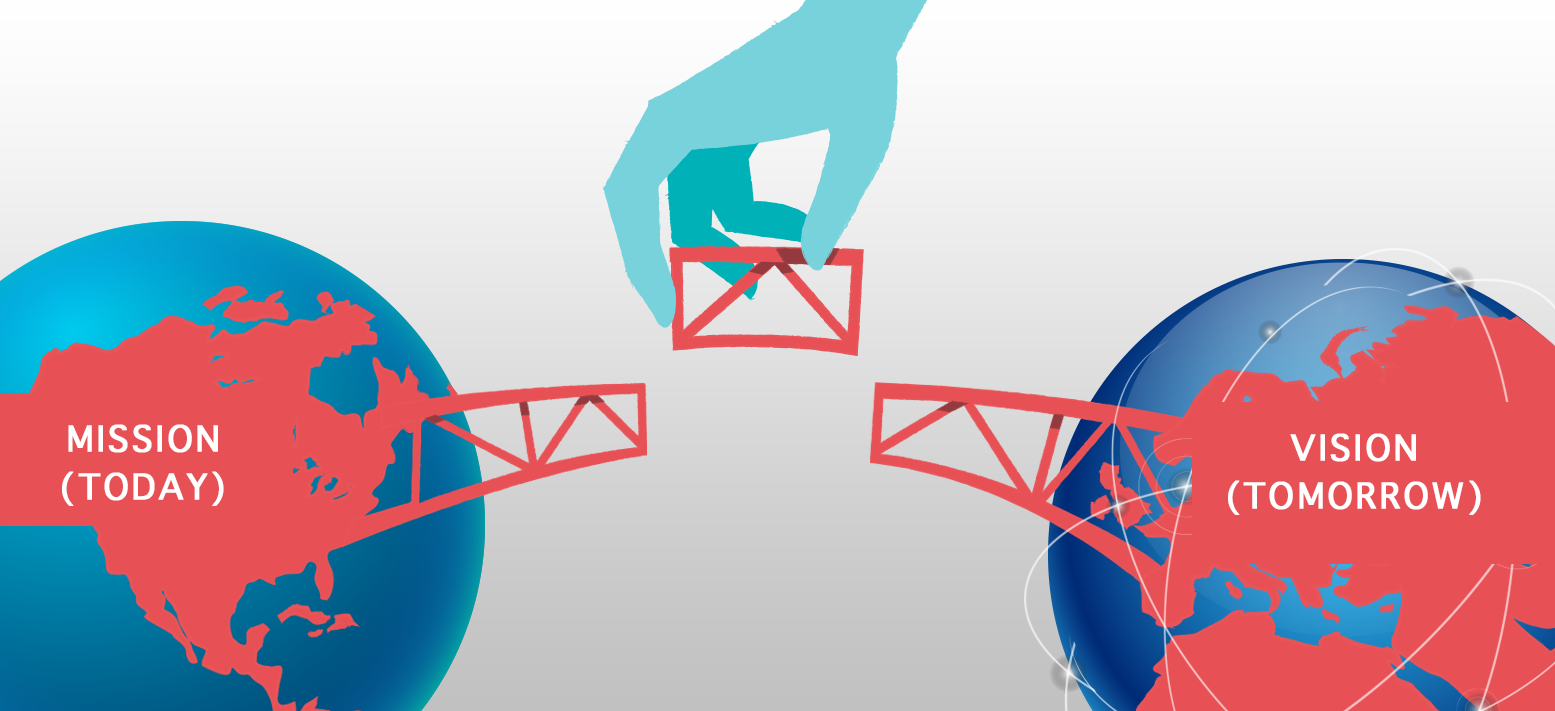
<style>
.page{position:relative;width:1555px;height:711px}
.page>*{position:absolute;margin:0}
.t1{font:48px/48px "AppleSymbols";letter-spacing:0.04em;color:#ffffff;font-weight:bold}
</style>
<div class="page">
<p class="t1" style="left:62px;top:424px;width:162px;height:82px;text-align:center">MISSION<br>(TODAY)</p>
<p class="t1" style="left:1228px;top:433px;width:253px;height:82px;text-align:center">VISION<br>(TOMORROW)</p>
</div>
